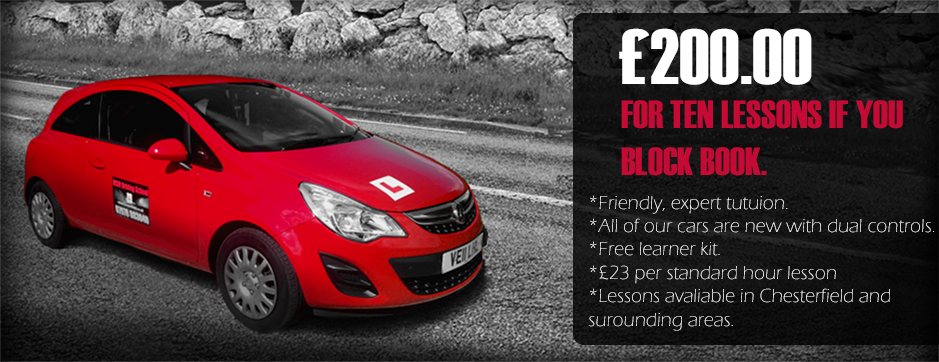
<style>
.page{position:relative;width:939px;height:362px}
.page>*{position:absolute;margin:0}
.t1{font:78.3px "Haettenschweiler";color:#ffffff}
.t2{font:39.1px "Haettenschweiler";color:#c60b35}
.t3{font:19.5px "ErasITC-Light";color:#ffffff}
</style>
<div class="page">
<p class="t1" style="left:619px;top:28px;width:193px;height:57px">£200.00</p>
<p class="t2" style="left:621px;top:100px;width:282px;height:76px">FOR TEN LESSONS IF YOU BLOCK BOOK.</p>
<p class="t3" style="left:588px;top:195px;width:346px;height:136px">*Friendly, expert tutuion.<br>*All of our cars are new with dual controls.<br>*Free learner kit.<br>*£23 per standard hour lesson<br>*Lessons avaliable in Chesterfield and surounding areas.</p>
</div>
